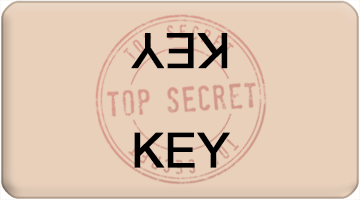
<style>
.page{position:relative;width:360px;height:200px;background:#e8d0bb}
.page>*{position:absolute;margin:0}
.t1{font:48px "ArialMT";color:#000000;font-weight:bold}
</style>
<div class="page">
<p class="t1" style="left:131px;top:33px;width:97px;height:36px;rotate:180deg">KEY</p>
<p class="t1" style="left:134px;top:132px;width:96px;height:36px">KEY</p>
</div>
